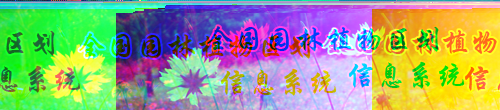
<style>
.page{position:relative;width:500px;height:110px}
.page>*{position:absolute;margin:0}
.t1{font:30px "STXingkai"}
</style>
<div class="page">
<p class="t1" style="left:207px;top:24px;width:258px;height:63px;text-align:center">全国园林植物区划      <br>信息系统</p>
</div>
